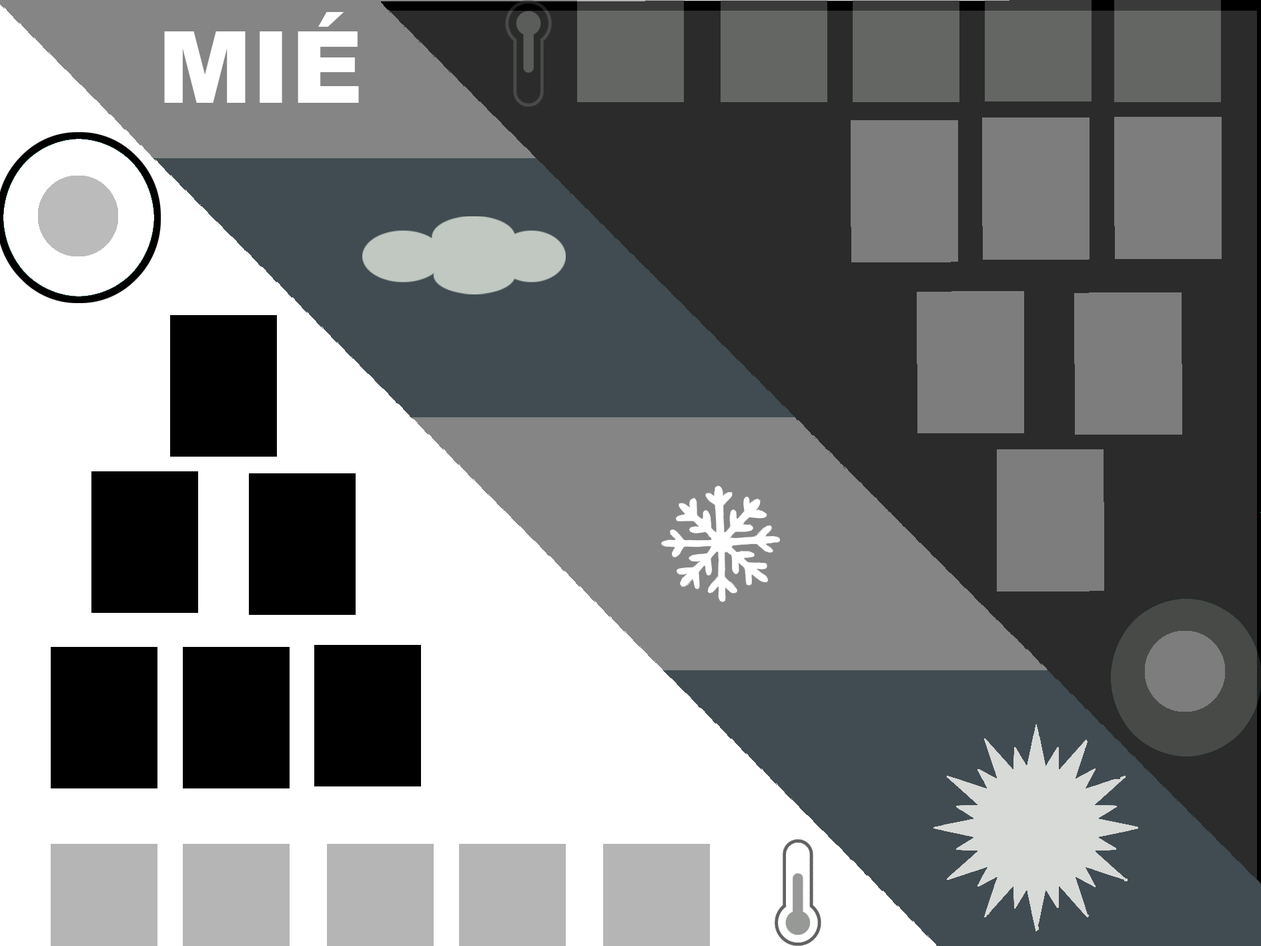
<style>
.page{position:relative;width:1261px;height:946px;background:#ffffff}
.page>*{position:absolute;margin:0}
.t1{font:100.1px "Arial-Black";color:#ffffff}
</style>
<div class="page">
<p class="t1" style="left:164px;top:12px;width:195px;height:91px">MIÉ</p>
</div>
